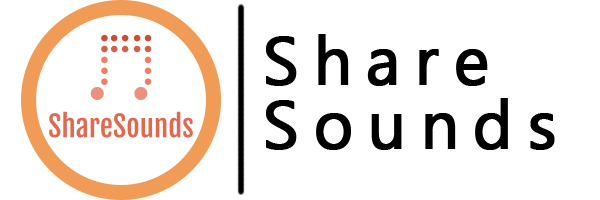
<style>
.page{position:relative;width:600px;height:200px;background:#ffffff}
.page>*{position:absolute;margin:0}
.t1{font:66.7px/64px "MicrosoftTaiLe";letter-spacing:0.2em;color:#000000;font-weight:bold}
</style>
<div class="page">
<p class="t1" style="left:266px;top:34px;width:289px;height:116px">Share<br>Sounds</p>
</div>
